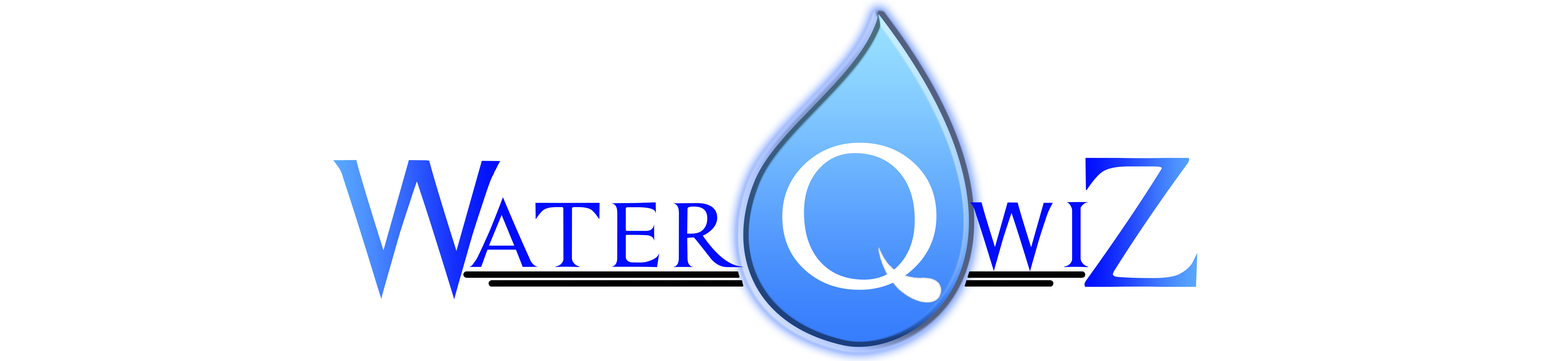
<style>
.page{position:relative;width:1568px;height:361px;background:#ffffff}
.page>*{position:absolute;margin:0}
.t1{font:218.8px "Assassin$";color:#ffffff}
.t2{font:201.5px "Assassin$"}
.t3{font:99.8px "Assassin$";color:#000cff}
</style>
<div class="page">
<p class="t1" style="left:782px;top:143px;width:155px;height:146px">O</p>
<p class="t2" style="left:333px;top:160px;width:167px;height:139px">W</p>
<p class="t2" style="left:1084px;top:158px;width:113px;height:129px">Z</p>
<p class="t3" style="left:469px;top:197px;width:275px;height:70px">ATER</p>
<p class="t3" style="left:970px;top:202px;width:118px;height:69px">WI</p>
</div>
